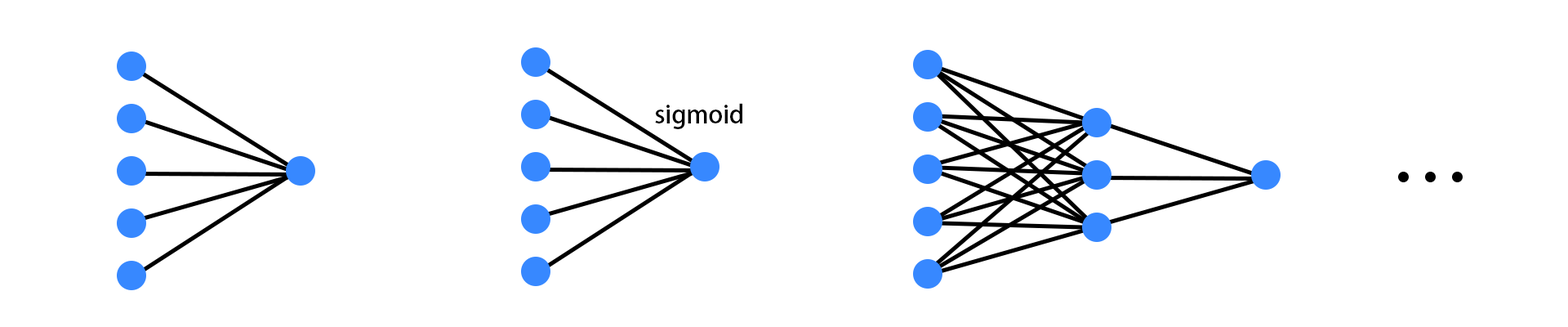
<style>
.page{position:relative;width:1568px;height:327px;background:#ffffff}
.page>*{position:absolute;margin:0}
.t1{font:24.5px "AdobeHeitiStd-Regular";color:#000000}
</style>
<div class="page">
<p class="t1" style="left:655px;top:103px;width:87px;height:26px">sigmoid</p>
</div>
